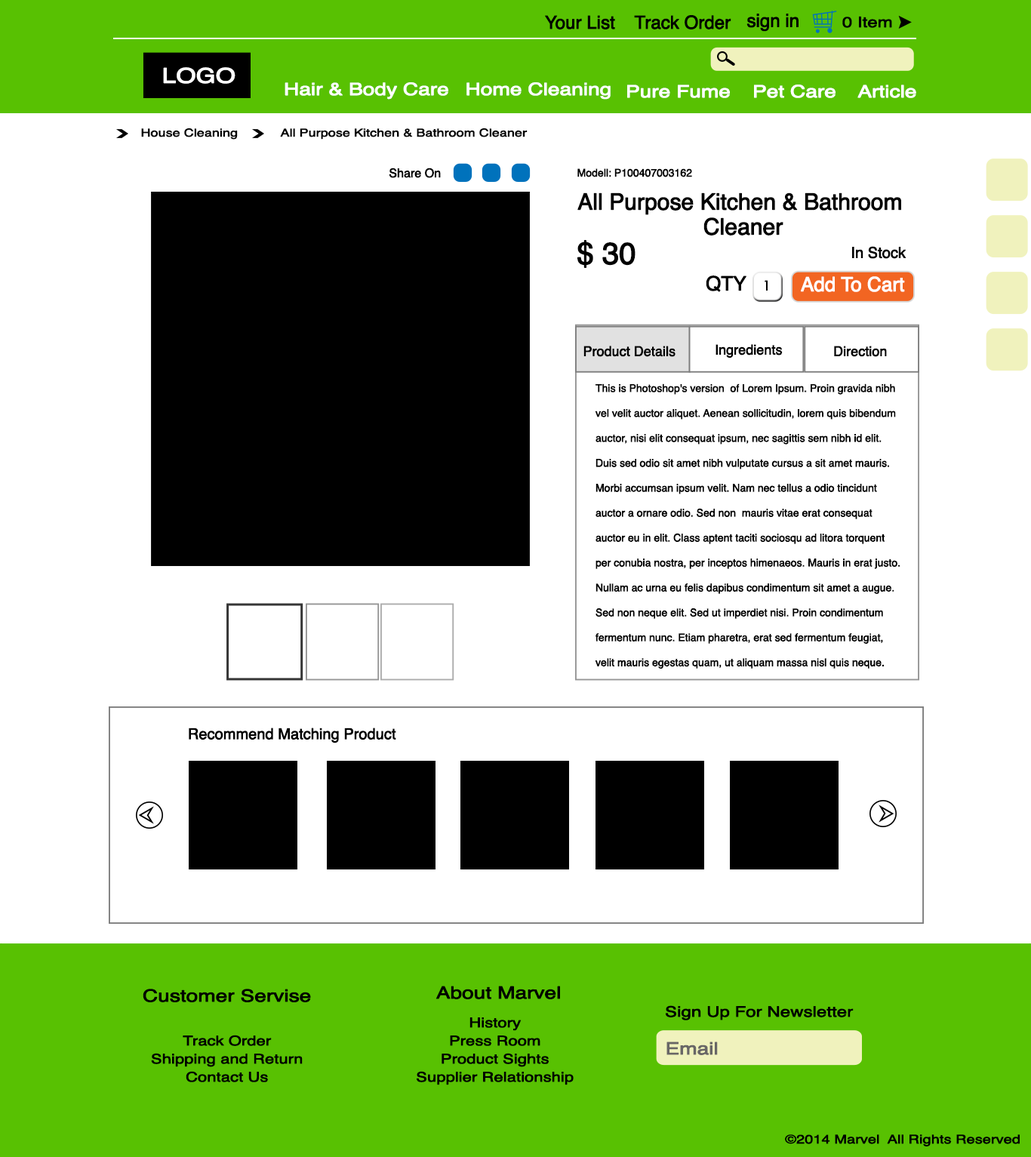
<style>
.page{position:relative;width:1031px;height:1157px;background:#ffffff}
.page>*{position:absolute;margin:0}
.t1{font:18.1px "Helvetica";letter-spacing:-0.025em;color:#000000;font-weight:bold}
.t2{font:14.5px "Helvetica";letter-spacing:-0.025em;color:#000000;font-weight:bold;scale:1.25 1}
.t3{font:20.3px "Helvetica";letter-spacing:-0.025em;color:#ffffff;font-weight:bold;scale:1.25 1}
.t4{font:16.9px "Helvetica";letter-spacing:-0.025em;color:#ffffff;font-weight:bold;scale:1.25 1}
.t5{font:10.9px "Helvetica";letter-spacing:-0.025em;color:#000000;font-weight:bold;scale:1.25 1}
.t6{font:12.1px "Helvetica";letter-spacing:-0.025em;color:#000000;font-weight:bold}
.t7{font:10.6px "Helvetica";letter-spacing:-0.025em;color:#000000;font-weight:bold}
.t8{font:22.6px/24.9px "Helvetica";letter-spacing:-0.025em;color:#000000;font-weight:bold}
.t9{font:30.2px "Helvetica";letter-spacing:-0.025em;color:#000000;font-weight:bold}
.t10{font:15.1px "Helvetica";letter-spacing:-0.025em;color:#000000;font-weight:bold}
.t11{font:19.6px "Helvetica";letter-spacing:-0.025em;color:#000000;font-weight:bold}
.t12{font:13.6px "STHeitiTC-Light";letter-spacing:-0.025em;color:#000000;font-weight:bold}
.t13{font:19.6px "Helvetica";letter-spacing:-0.025em;color:#ffffff;font-weight:bold}
.t14{font:13.6px "Helvetica";letter-spacing:-0.025em;color:#000000;font-weight:bold}
.t15{font:9.1px "Helvetica";color:#000000}
.t16{font:16.9px "Helvetica";letter-spacing:-0.025em;color:#000000;font-weight:bold;scale:1.25 1}
.t17{font:13.3px/18.1px "Helvetica";letter-spacing:-0.025em;color:#000000;font-weight:bold;scale:1.25 1}
.t18{font:16.9px "Helvetica";letter-spacing:-0.025em;color:#686666;font-weight:bold;scale:1.25 1}
.t19{font:12.1px "Helvetica";letter-spacing:-0.025em;color:#000000;font-weight:bold;scale:1.25 1}
</style>
<div class="page">
<p class="t1" style="left:545px;top:15px;width:70px;height:14px">Your List</p>
<p class="t1" style="left:634px;top:15px;width:97px;height:14px">Track Order</p>
<p class="t1" style="left:746px;top:14px;width:52px;height:18px">sign in</p>
<p class="t2" style="left:842px;top:16px;width:50px;height:12px">0 Item</p>
<p class="t3" style="left:163px;top:67px;width:72px;height:17px">LOGO</p>
<p class="t4" style="left:284px;top:82px;width:164px;height:18px">Hair &amp; Body Care</p>
<p class="t4" style="left:466px;top:82px;width:144px;height:18px">Home Cleaning</p>
<p class="t4" style="left:627px;top:85px;width:103px;height:13px">Pure Fume</p>
<p class="t4" style="left:754px;top:85px;width:81px;height:13px">Pet Care</p>
<p class="t4" style="left:857px;top:85px;width:59px;height:13px">Article</p>
<p class="t5" style="left:141px;top:128px;width:97px;height:12px">House Cleaning</p>
<p class="t5" style="left:280px;top:128px;width:247px;height:12px">All Purpose Kitchen &amp; Bathroom Cleaner</p>
<p class="t6" style="left:389px;top:168px;width:52px;height:10px">Share On</p>
<p class="t7" style="left:577px;top:168px;width:115px;height:9px">Modell: P100407003162</p>
<p class="t8" style="left:577px;top:192px;width:324px;height:43px;text-align:center">All Purpose Kitchen &amp; Bathroom <br>Cleaner</p>
<p class="t9" style="left:577px;top:240px;width:58px;height:28px">$ 30</p>
<p class="t10" style="left:852px;top:246px;width:54px;height:13px">In Stock</p>
<p class="t11" style="left:706px;top:275px;width:40px;height:17px">QTY</p>
<p class="t12" style="left:764px;top:280px;width:3px;height:11px">1</p>
<p class="t13" style="left:801px;top:276px;width:104px;height:16px">Add To Cart</p>
<p class="t14" style="left:583px;top:346px;width:92px;height:11px">Product Details</p>
<p class="t14" style="left:715px;top:344px;width:68px;height:14px">Ingredients</p>
<p class="t14" style="left:834px;top:346px;width:53px;height:11px">Direction</p>
<p class="t15" style="left:595px;top:383px;width:305px;height:286px">This is Photoshop's version  of Lorem Ipsum. Proin gravida nibh vel velit auctor aliquet. Aenean sollicitudin, lorem quis bibendum auctor, nisi elit consequat ipsum, nec sagittis sem nibh id elit. Duis sed odio sit amet nibh vulputate cursus a sit amet mauris. Morbi accumsan ipsum velit. Nam nec tellus a odio tincidunt auctor a ornare odio. Sed non  mauris vitae erat consequat auctor eu in elit. Class aptent taciti sociosqu ad litora torquent per conubia nostra, per inceptos himenaeos. Mauris in erat justo. Nullam ac urna eu felis dapibus condimentum sit amet a augue. Sed non neque elit. Sed ut imperdiet nisi. Proin condimentum fermentum nunc. Etiam pharetra, erat sed fermentum feugiat, velit mauris egestas quam, ut aliquam massa nisl quis neque. Suspendisse in orci enim.</p>
<p class="t10" style="left:189px;top:727px;width:207px;height:16px">Recommend Matching Product</p>
<p class="t16" style="left:143px;top:989px;width:168px;height:13px">Customer Servise</p>
<p class="t16" style="left:435px;top:986px;width:125px;height:13px">About Marvel</p>
<p class="t2" style="left:666px;top:1005px;width:187px;height:15px">Sign Up For Newsletter</p>
<p class="t17" style="left:417px;top:1017px;width:157px;height:68px;text-align:center">History<br>Press Room<br>Product Sights<br>Supplier Relationship</p>
<p class="t17" style="left:151px;top:1035px;width:152px;height:47px;text-align:center">Track Order<br>Shipping and Return<br>Contact Us</p>
<p class="t18" style="left:666px;top:1041px;width:52px;height:14px">Email</p>
<p class="t19" style="left:785px;top:1134px;width:234px;height:12px">©2014 Marvel  All Rights Reserved</p>
</div>
